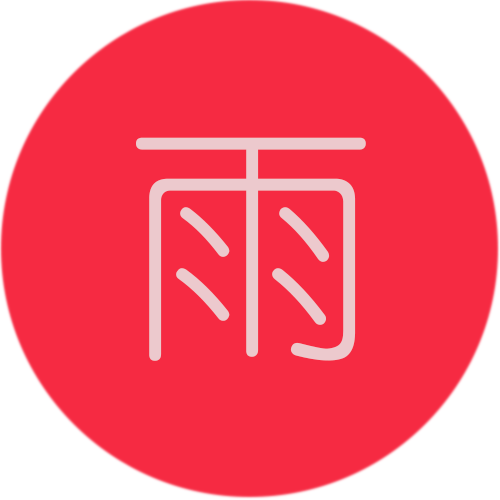
<style>
.page{position:relative;width:500px;height:500px;background:#f62a42}
.page>*{position:absolute;margin:0}
.t1{font:256px "TYenRound-Light";color:#ecc9cd}
</style>
<div class="page">
<p class="t1" style="left:136px;top:137px;width:230px;height:224px">雨</p>
</div>
